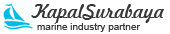
<style>
.page{position:relative;width:170px;height:34px;background:#ffffff}
.page>*{position:absolute;margin:0}
.t1{font:19px "Freehand521BT-RegularC";color:#373737}
.t2{font:10px "ArialMT";color:#373737}
</style>
<div class="page">
<p class="t1" style="left:31px;top:4px;width:133px;height:19px">KapalSurabaya</p>
<p class="t2" style="left:37px;top:23px;width:104px;height:9px">marine industry partner</p>
</div>
